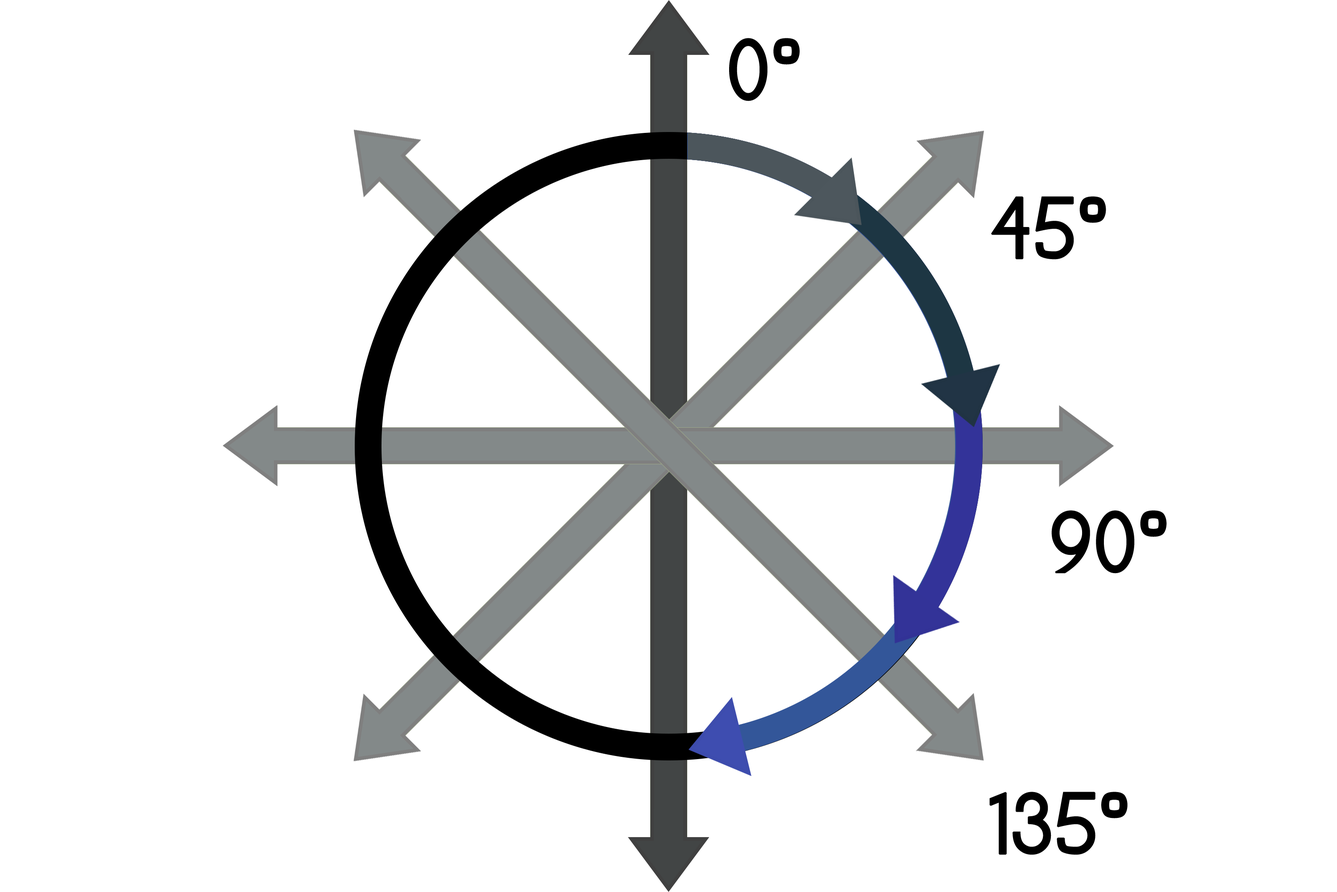
<style>
.page{position:relative;width:1337px;height:892px;background:#ffffff}
.page>*{position:absolute;margin:0}
.t1{font:62.4px "EleganTech";color:#000000;font-weight:bold}
</style>
<div class="page">
<p class="t1" style="left:729px;top:38px;width:71px;height:63px">0º</p>
<p class="t1" style="left:991px;top:196px;width:115px;height:63px">45º</p>
<p class="t1" style="left:1052px;top:510px;width:115px;height:63px">90º</p>
<p class="t1" style="left:990px;top:791px;width:138px;height:64px">135º</p>
</div>
